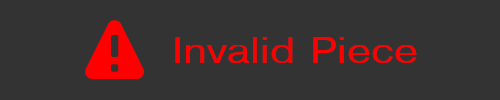
<style>
.page{position:relative;width:500px;height:100px;background:#333333}
.page>*{position:absolute;margin:0}
.t1{font:36px "Helvetica";color:#fe0000;scale:1.2 1}
</style>
<div class="page">
<p class="t1" style="left:175px;top:37px;width:242px;height:26px">Invalid Piece</p>
</div>
